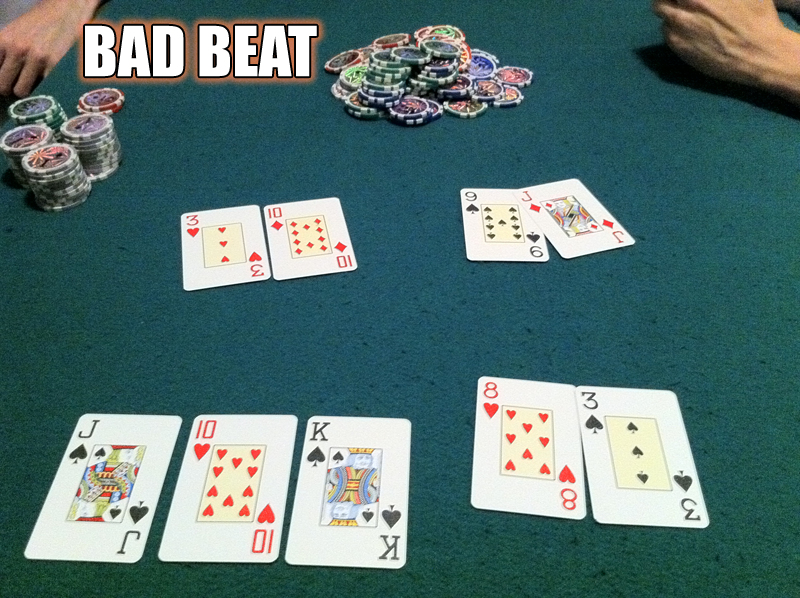
<style>
.page{position:relative;width:800px;height:598px}
.page>*{position:absolute;margin:0}
.t1{font:64px "Impact";color:#ffffff}
</style>
<div class="page">
<p class="t1" style="left:85px;top:25px;width:232px;height:52px">BAD BEAT</p>
</div>
